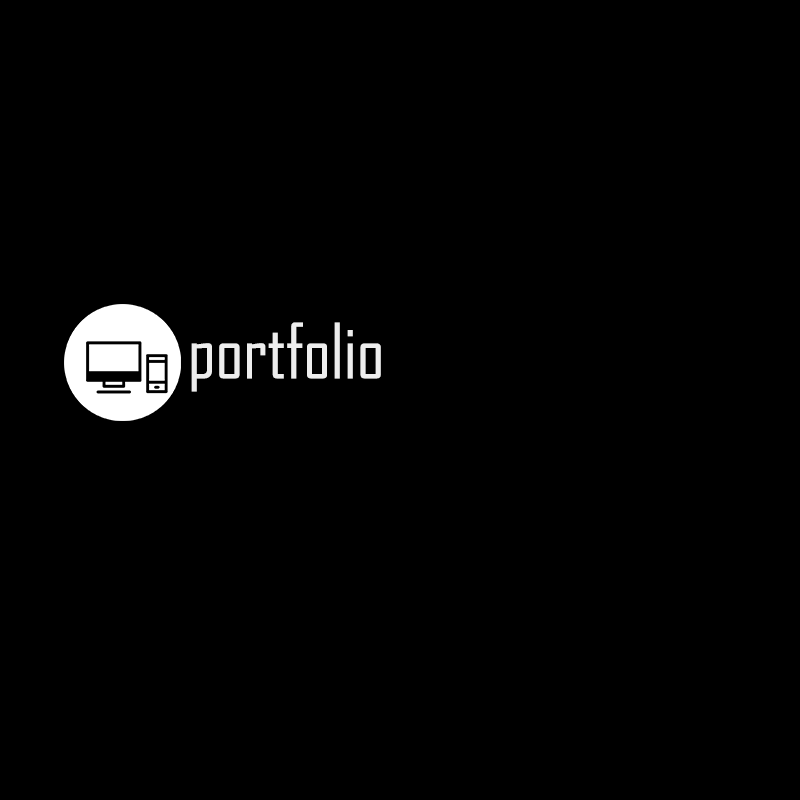
<style>
.page{position:relative;width:800px;height:800px;background:#000000}
.page>*{position:absolute;margin:0}
.t1{font:72.9px "AgencyFB-Reg";color:#ededed}
</style>
<div class="page">
<p class="t1" style="left:191px;top:322px;width:190px;height:70px">portfolio</p>
</div>
